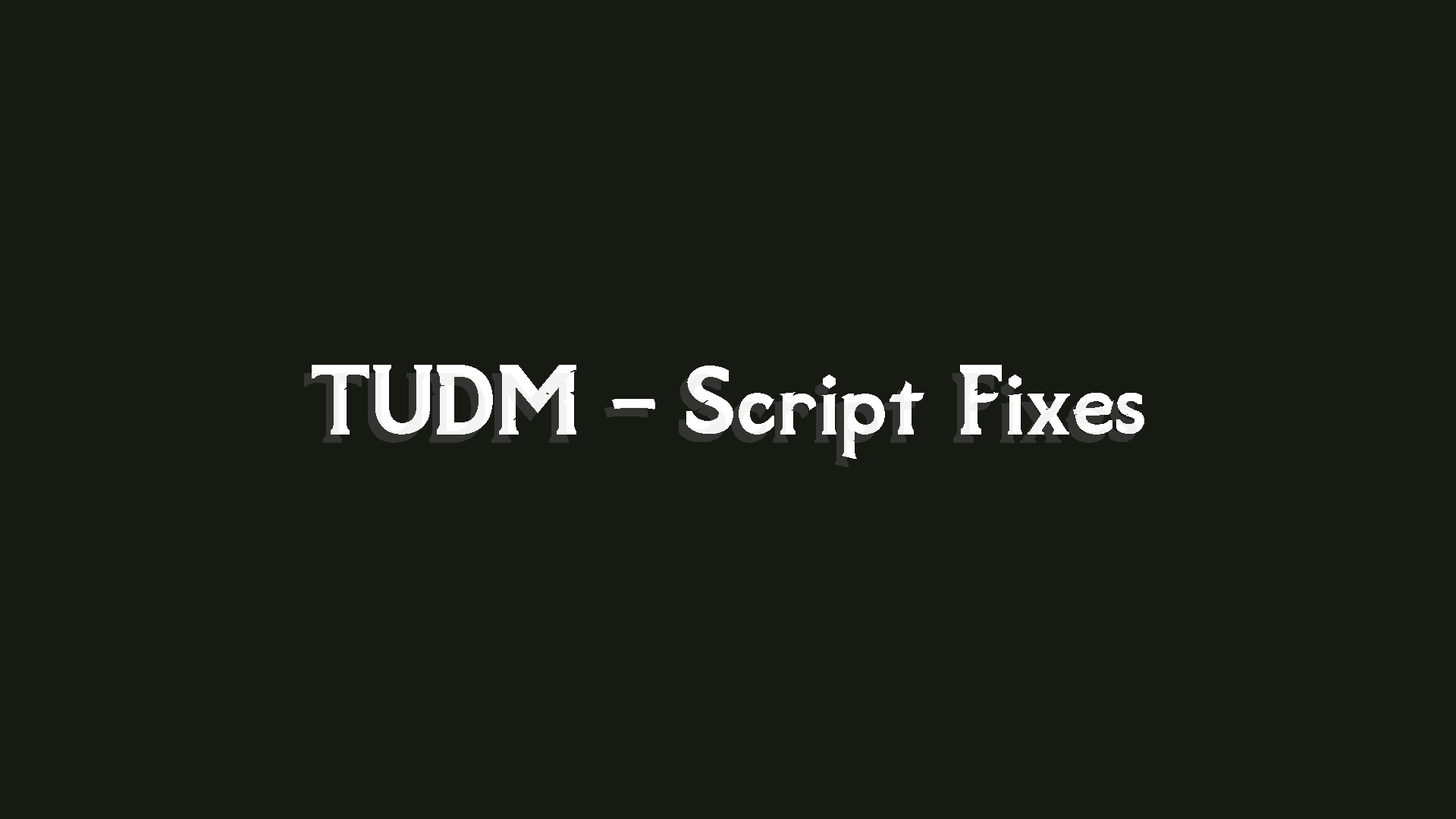
<style>
.page{position:relative;width:1456px;height:819px;background:#171913}
.page>*{position:absolute;margin:0}
.t1{font:125.7px "SovngardeBold";color:#ffffff}
.t2{font:125.7px "SovngardeBold";letter-spacing:-0.04em;color:#ffffff}
</style>
<div class="page">
<p class="t1" style="left:312px;top:365px;width:832px;height:94px">TUDM<span class="t2"> - </span>Script Fixes</p>
</div>
